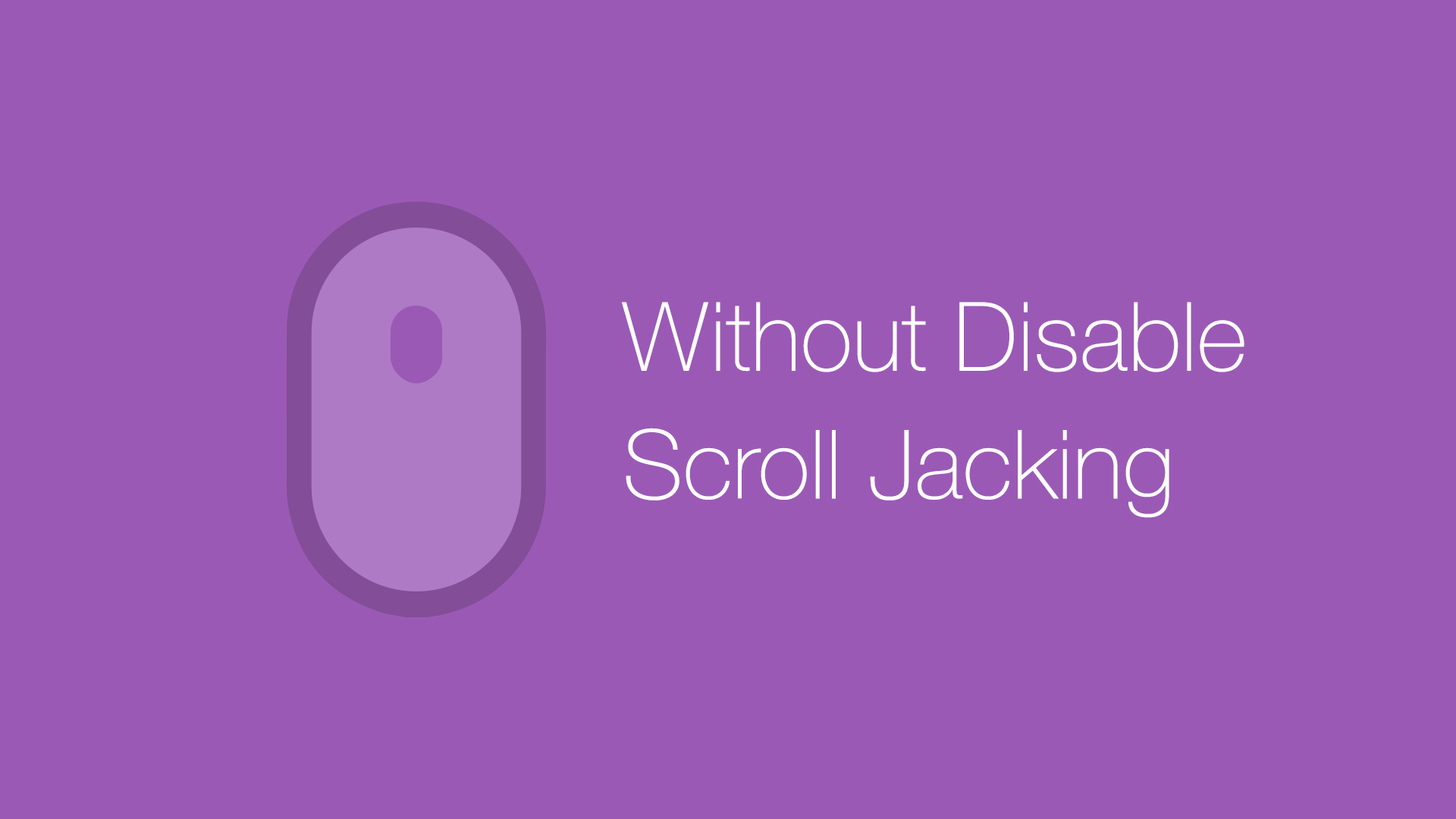
<style>
.page{position:relative;width:1456px;height:819px;background:#9b59b6}
.page>*{position:absolute;margin:0}
.t1{font:95.9px/127.8px "HelveticaNeue-Thin";color:#ffffff}
</style>
<div class="page">
<p class="t1" style="left:622px;top:302px;width:622px;height:216px">Without Disable <br>Scroll Jacking</p>
</div>
